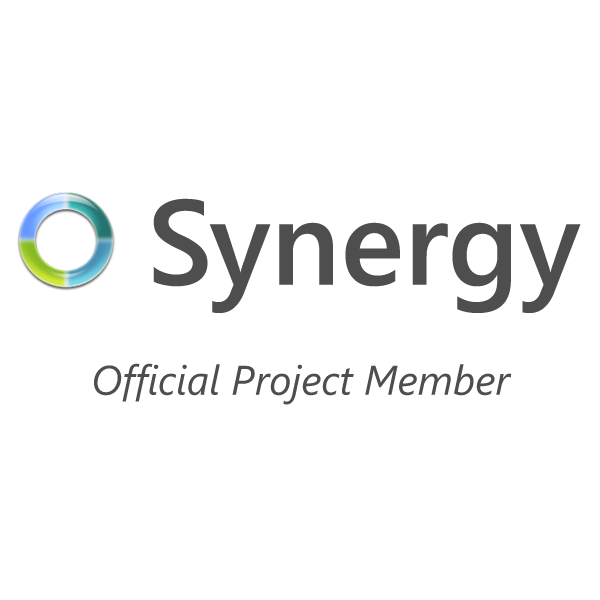
<style>
.page{position:relative;width:600px;height:600px;background:#ffffff}
.page>*{position:absolute;margin:0}
.t1{font:120.2px "SegoeUI-SemiBold";color:#4e4e4e}
.t2{font:41.3px "SegoeUI-Italic";color:#4e4e4e}
</style>
<div class="page">
<p class="t1" style="left:153px;top:198px;width:428px;height:115px">Synergy</p>
<p class="t2" style="left:94px;top:363px;width:418px;height:42px">Official Project Member</p>
</div>
